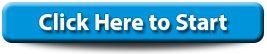
<style>
.page{position:relative;width:267px;height:54px;background:#0095da}
.page>*{position:absolute;margin:0}
.t1{font:23.9px "MyriadPro-Bold";color:#ffffff}
</style>
<div class="page">
<p class="t1" style="left:39px;top:13px;width:188px;height:17px">Click Here to Start</p>
</div>
